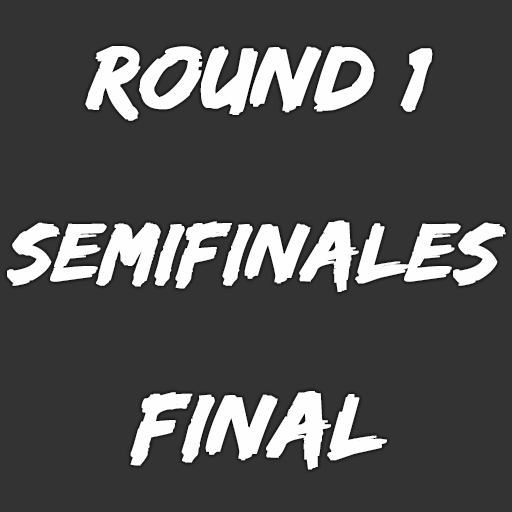
<style>
.page{position:relative;width:512px;height:512px;background:#333333}
.page>*{position:absolute;margin:0}
.t1{font:93px "EdoSZ";color:#fefefe;font-weight:bold;font-style:italic;scale:1.04 1}
.t2{font:85px "EdoSZ";color:#fefefe;font-weight:bold;font-style:italic;scale:1.04 1}
</style>
<div class="page">
<p class="t1" style="left:85px;top:46px;width:348px;height:75px">round 1</p>
<p class="t2" style="left:7px;top:220px;width:499px;height:72px">semifinales</p>
<p class="t1" style="left:130px;top:391px;width:257px;height:79px">final</p>
</div>
